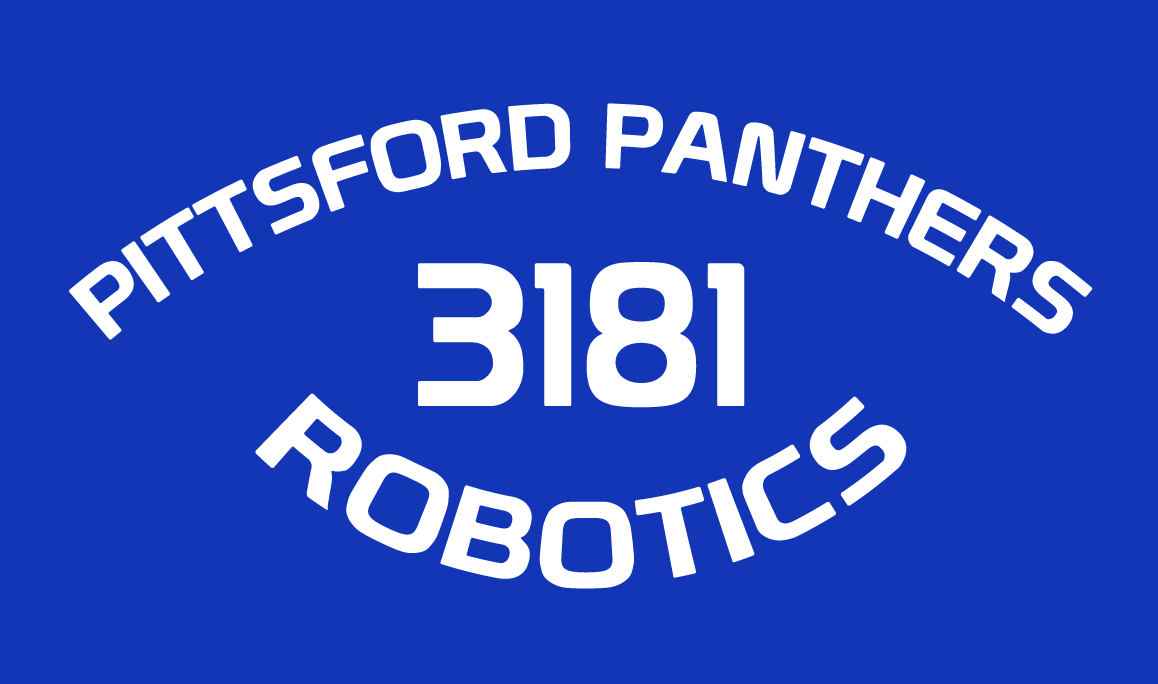
<style>
.page{position:relative;width:1158px;height:684px;background:#1336b7}
.page>*{position:absolute;margin:0}
.t1{font:89.7px "Prototype";color:#ffffff}
.t2{font:199.3px "Prototype";color:#ffffff}
.t3{font:114.6px "Prototype";color:#ffffff}
</style>
<div class="page">
<p class="t1" style="left:69px;top:103px;width:1024px;height:237px;text-align:center">PITTSFORD PANTHERS</p>
<p class="t2" style="left:418px;top:262px;width:327px;height:146px">3181</p>
<p class="t3" style="left:255px;top:393px;width:652px;height:196px;text-align:center">ROBOTICS</p>
</div>
